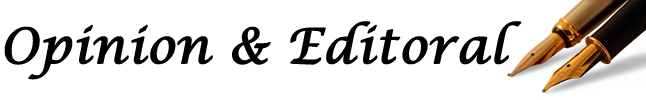
<style>
.page{position:relative;width:646px;height:100px;background:#ffffff}
.page>*{position:absolute;margin:0}
.t1{font:48px "LucidaCalligraphy-Italic";color:#000000;font-weight:bold}
</style>
<div class="page">
<p class="t1" style="left:4px;top:21px;width:518px;height:59px">Opinion &amp; Editoral</p>
</div>
